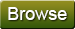
<style>
.page{position:relative;width:75px;height:29px}
.page>*{position:absolute;margin:0}
.t1{font:18px "ArialMT";color:#ffffff}
</style>
<div class="page">
<p class="t1" style="left:8px;top:7px;width:59px;height:13px">Browse</p>
<p class="t1" style="left:8px;top:7px;width:59px;height:13px">Browse</p>
</div>
